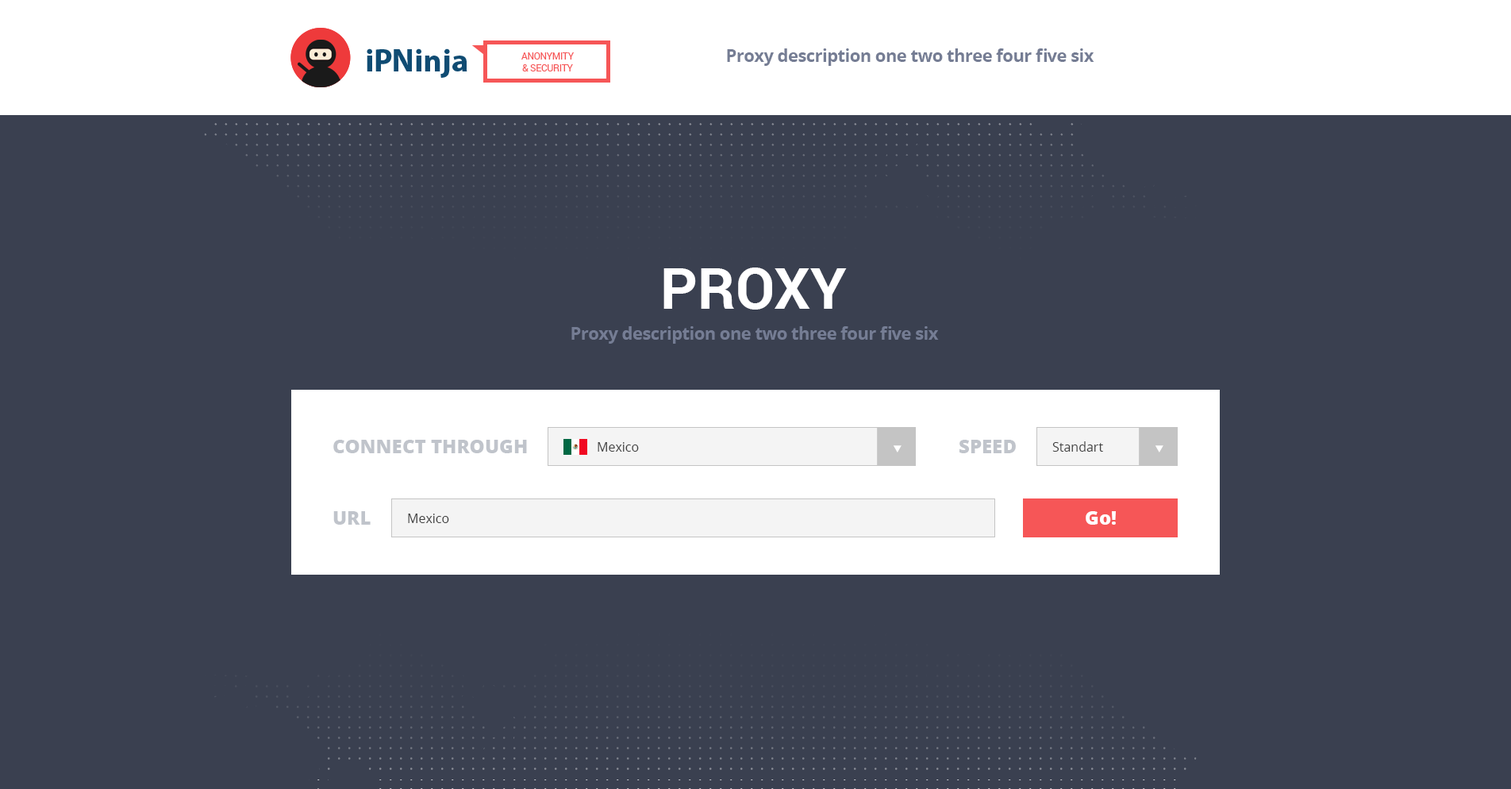
<style>
.page{position:relative;width:1511px;height:789px;background:#3a4050}
.page>*{position:absolute;margin:0}
.t1{font:9.5px "Roboto-Regular";letter-spacing:-0.025em;color:#f65657;text-transform:uppercase}
.t2{font:17.5px "OpenSans-Bold";letter-spacing:-0.025em;color:#757d94}
.t3{font:57.2px "Roboto-Bold";color:#ffffff;text-transform:uppercase}
.t4{font:19.1px "OpenSans-Extrabold";color:#c0c4cb}
.t5{font:12.7px "OpenSans";color:#414141}
.t6{font:19.1px "OpenSans-Extrabold";color:#c0c4cb;text-transform:uppercase}
.t7{font:19.1px "OpenSans-Extrabold";color:#ffffff}
</style>
<div class="page">
<p class="t1" style="left:522px;top:52px;width:53px;height:19px;text-align:center">anonymity <br>&amp; security</p>
<p class="t2" style="left:727px;top:48px;width:368px;height:18px">Proxy description one two three four five six</p>
<p class="t3" style="left:664px;top:267px;width:183px;height:43px">proxy</p>
<p class="t2" style="left:572px;top:326px;width:367px;height:18px">Proxy description one two three four five six</p>
<p class="t4" style="left:333px;top:440px;width:194px;height:13px">CONNECT THROUGH</p>
<p class="t5" style="left:598px;top:442px;width:41px;height:10px">Mexico</p>
<p class="t6" style="left:960px;top:440px;width:56px;height:13px">Speed</p>
<p class="t5" style="left:1053px;top:441px;width:50px;height:11px">Standart</p>
<p class="t4" style="left:333px;top:511px;width:38px;height:14px">URL</p>
<p class="t5" style="left:408px;top:514px;width:41px;height:9px">Mexico</p>
<p class="t7" style="left:1086px;top:511px;width:30px;height:14px">Go!</p>
</div>
